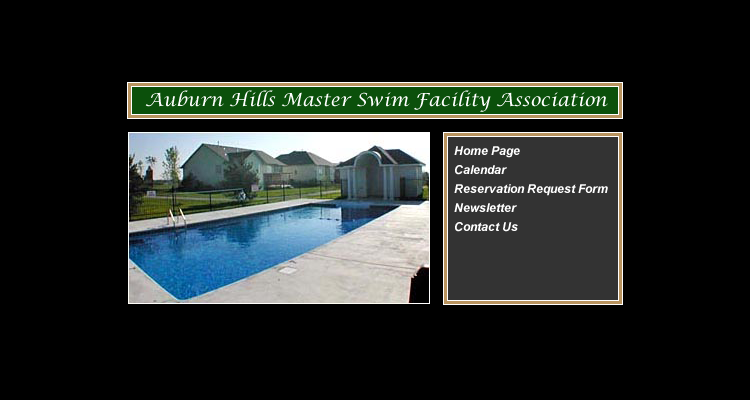
<style>
.page{position:relative;width:750px;height:400px;background:#000000}
.page>*{position:absolute;margin:0}
.t1{font:18px "LucidaCalligraphy-Italic";color:#ffffff}
.t2{font:12px/19px "Arial-BoldItalicMT";color:#ffffff}
</style>
<div class="page">
<p class="t1" style="left:145px;top:90px;width:463px;height:22px">Auburn Hills Master Swim Facility Association</p>
<p class="t2" style="left:454px;top:146px;width:154px;height:86px">Home Page<br>Calendar<br>Reservation Request Form<br>Newsletter<br>Contact Us</p>
</div>
